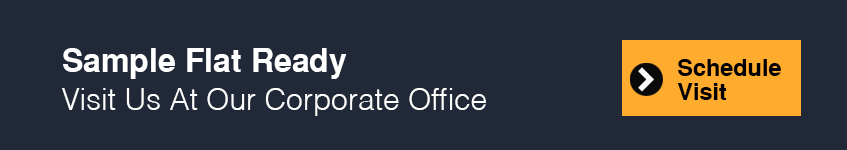
<style>
.page{position:relative;width:847px;height:150px;background:#212838}
.page>*{position:absolute;margin:0}
.t1{font:32.1px "SansSerifBold";color:#ffffff}
.t2{font:23.4px/24px "SansSerifBold";color:#000000}
.t3{font:30px "Helvetica-Light";color:#ffffff}
</style>
<div class="page">
<p class="t1" style="left:63px;top:48px;width:284px;height:31px">Sample Flat Ready</p>
<p class="t2" style="left:677px;top:59px;width:104px;height:41px">Schedule <br>Visit</p>
<p class="t3" style="left:62px;top:88px;width:424px;height:28px">Visit Us At Our Corporate Office</p>
</div>
